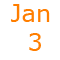
<style>
.page{position:relative;width:60px;height:60px;background:#ffffff}
.page>*{position:absolute;margin:0}
.t1{font:24px "Verdana";color:#ff7e00}
</style>
<div class="page">
<p class="t1" style="left:11px;top:4px;width:39px;height:47px">Jan<br>   3</p>
</div>
